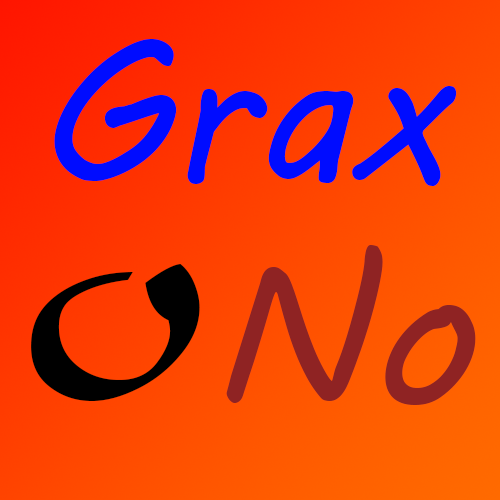
<style>
.page{position:relative;width:500px;height:500px}
.page>*{position:absolute;margin:0}
.t1{font:200px "MVBoli";color:#000cff}
.t2{font:200px "MVBoli";color:#8f2323}
.t3{font:150px "MaturaMTScriptCapitals";color:#000000}
</style>
<div class="page">
<p class="t1" style="left:54px;top:39px;width:403px;height:147px">Grax</p>
<p class="t2" style="left:226px;top:245px;width:250px;height:160px">No</p>
<p class="t3" style="left:31px;top:264px;width:169px;height:137px">O</p>
</div>
